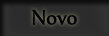
<style>
.page{position:relative;width:109px;height:36px}
.page>*{position:absolute;margin:0}
.t1{font:25px "Nyala-Regular";color:#000000}
</style>
<div class="page">
<p class="t1" style="left:32px;top:9px;width:45px;height:16px">Novo</p>
</div>
